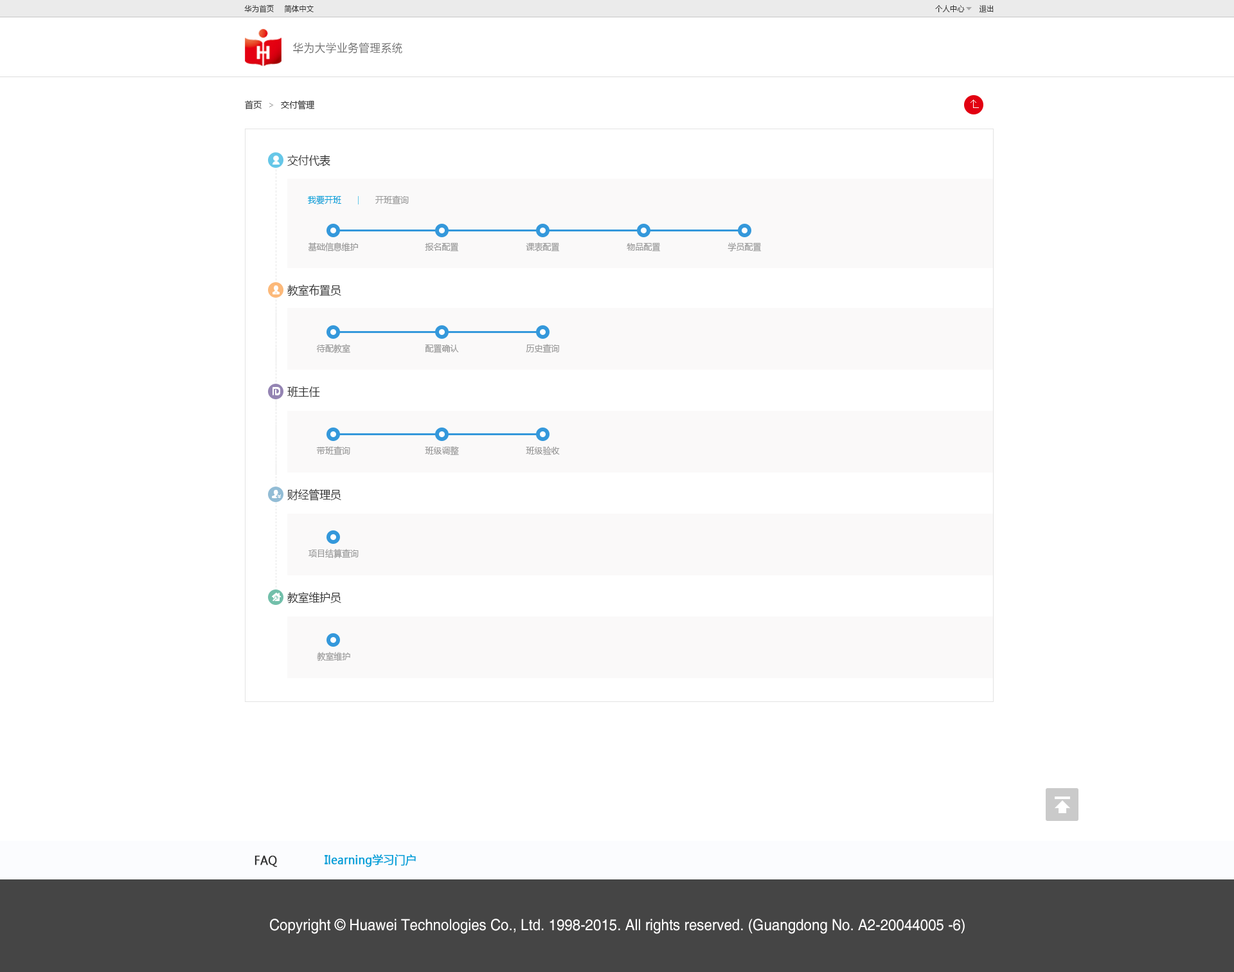
<style>
.page{position:relative;width:1234px;height:972px;background:#ffffff}
.page>*{position:absolute;margin:0}
.t1{font:7.7px "MicrosoftYaHei";letter-spacing:0.025em;color:#333333;scale:0.93 1}
.t2{font:11.6px "FZLTXHK";letter-spacing:0.025em;color:#666666;scale:0.93 1}
.t3{font:9px "MicrosoftYaHei";color:#333333;scale:0.93 1}
.t4{font:11.6px "MicrosoftYaHei";color:#333333;scale:0.93 1}
.t5{font:9px "MicrosoftYaHei";color:#00a1d9;scale:0.93 1}
.t6{font:9px "MicrosoftYaHei";color:#999999;scale:0.93 1}
.t7{font:11.6px "MicrosoftYaHei";color:#333333;font-weight:bold;scale:0.93 1}
.t8{font:11.6px "MicrosoftYaHei";color:#00a1d9;font-weight:bold;scale:0.93 1}
.t9{font:15.4px "Helvetica";color:#fffefe;scale:0.93 1}
</style>
<div class="page">
<p class="t1" style="left:244px;top:5px;width:30px;height:8px">华为首页</p>
<p class="t1" style="left:284px;top:4px;width:30px;height:9px">简体中文</p>
<p class="t1" style="left:935px;top:5px;width:30px;height:7px">个人中心</p>
<p class="t1" style="left:979px;top:5px;width:15px;height:8px">退出</p>
<p class="t2" style="left:293px;top:42px;width:109px;height:11px">华为大学业务管理系统</p>
<p class="t3" style="left:245px;top:100px;width:17px;height:9px">首页</p>
<p class="t3" style="left:281px;top:100px;width:34px;height:10px">交付管理</p>
<p class="t4" style="left:287px;top:154px;width:43px;height:12px">交付代表</p>
<p class="t5" style="left:308px;top:195px;width:33px;height:9px">我要开班</p>
<p class="t6" style="left:375px;top:195px;width:34px;height:9px">开班查询</p>
<p class="t6" style="left:308px;top:242px;width:50px;height:10px">基础信息维护</p>
<p class="t6" style="left:425px;top:242px;width:34px;height:9px">报名配置</p>
<p class="t6" style="left:526px;top:242px;width:34px;height:9px">课表配置</p>
<p class="t6" style="left:627px;top:242px;width:34px;height:9px">物品配置</p>
<p class="t6" style="left:728px;top:242px;width:34px;height:9px">学员配置</p>
<p class="t4" style="left:287px;top:284px;width:54px;height:12px">教室布置员</p>
<p class="t6" style="left:316px;top:344px;width:34px;height:9px">待配教室</p>
<p class="t6" style="left:425px;top:344px;width:34px;height:9px">配置确认</p>
<p class="t6" style="left:526px;top:344px;width:33px;height:9px">历史查询</p>
<p class="t4" style="left:287px;top:386px;width:33px;height:11px">班主任</p>
<p class="t6" style="left:316px;top:446px;width:34px;height:9px">带班查询</p>
<p class="t6" style="left:425px;top:446px;width:34px;height:9px">班级调整</p>
<p class="t6" style="left:526px;top:446px;width:34px;height:9px">班级验收</p>
<p class="t4" style="left:287px;top:489px;width:54px;height:12px">财经管理员</p>
<p class="t6" style="left:309px;top:549px;width:50px;height:10px">项目结算查询</p>
<p class="t4" style="left:287px;top:591px;width:54px;height:12px">教室维护员</p>
<p class="t6" style="left:317px;top:652px;width:33px;height:10px">教室维护</p>
<p class="t7" style="left:255px;top:856px;width:22px;height:11px">FAQ</p>
<p class="t8" style="left:325px;top:854px;width:91px;height:13px">Ilearning学习门户</p>
<p class="t9" style="left:270px;top:919px;width:695px;height:15px">Copyright © Huawei Technologies Co., Ltd. 1998-2015. All rights reserved. (Guangdong No. A2-20044005 -6)</p>
</div>
